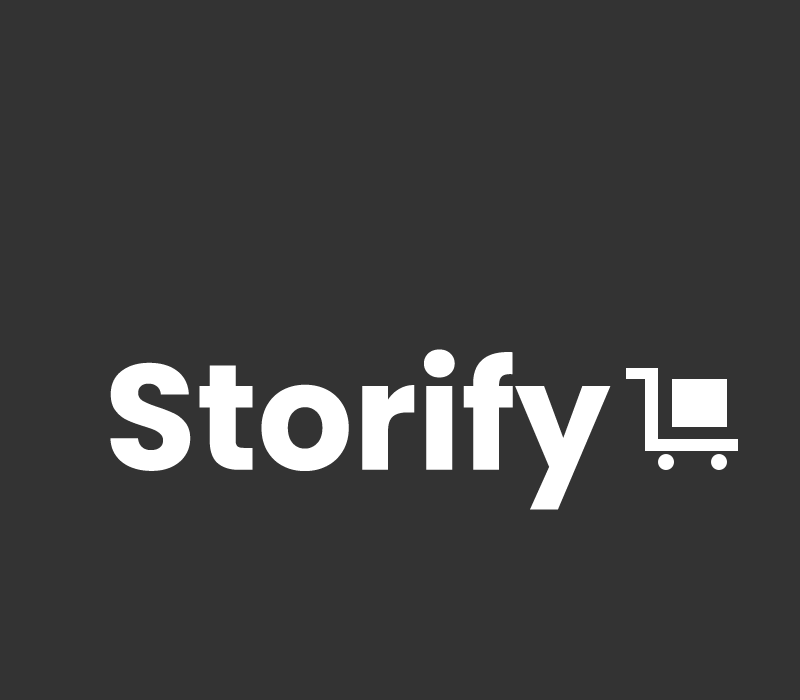
<style>
.page{position:relative;width:800px;height:700px;background:#333333}
.page>*{position:absolute;margin:0}
.t1{font:150px "Poppins-Bold";color:#ffffff}
</style>
<div class="page">
<p class="t1" style="left:110px;top:349px;width:501px;height:161px">Storify</p>
</div>
